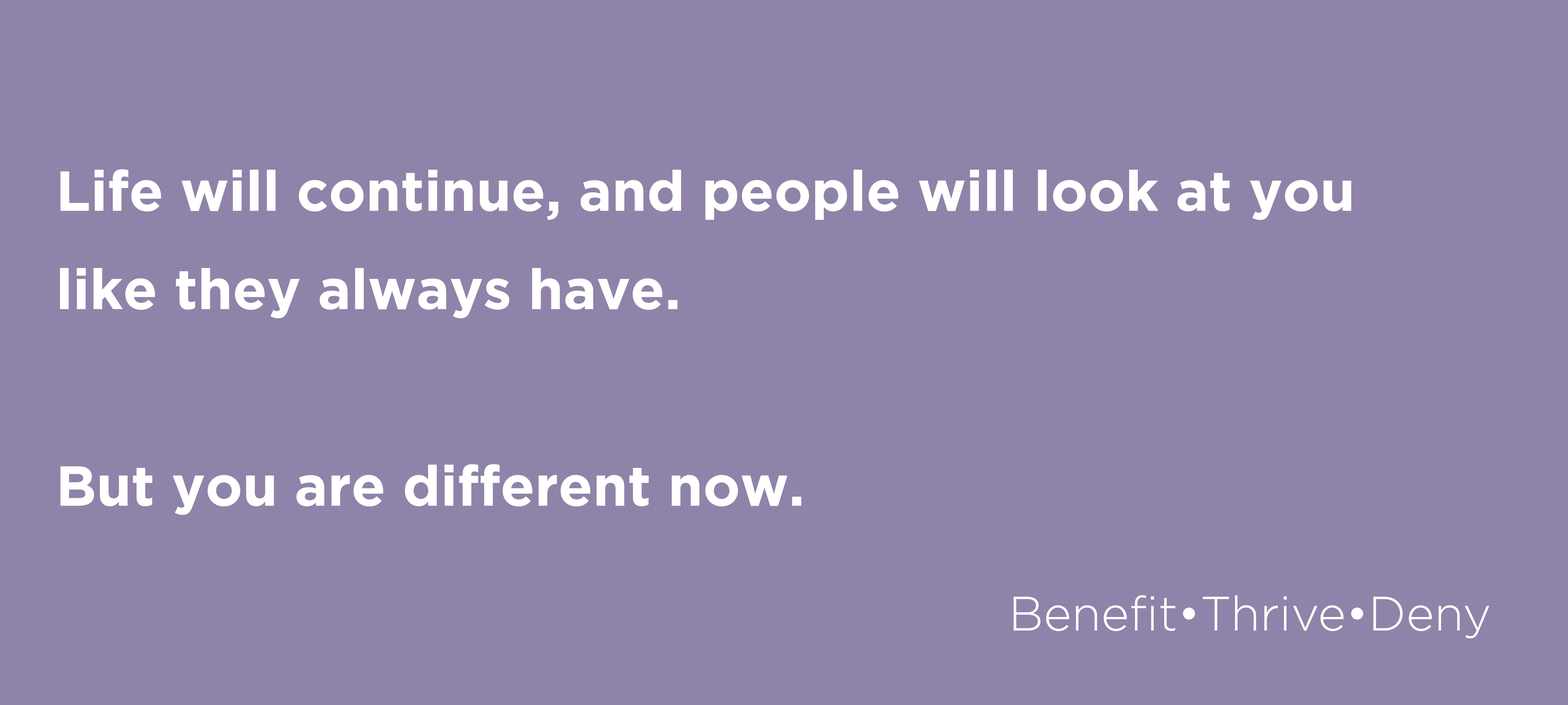
<style>
.page{position:relative;width:1568px;height:705px;background:#8f83a9}
.page>*{position:absolute;margin:0}
.t1{font:56.2px/98.4px "Gotham-Bold";color:#ffffff}
.t2{font:48.1px "Gotham-Light";color:#ffffff}
</style>
<div class="page">
<p class="t1" style="left:60px;top:169px;width:1291px;height:346px">Life will continue, and people will look at you like they always have. <br><br>But you are different now.</p>
<p class="t2" style="left:1014px;top:595px;width:475px;height:44px">Benefit•Thrive•Deny</p>
</div>
